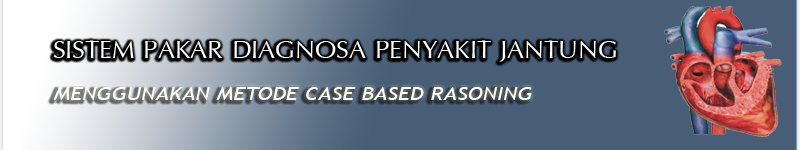
<style>
.page{position:relative;width:800px;height:150px;background:#475e76}
.page>*{position:absolute;margin:0}
.t1{font:39.7px "IrisUPC";color:#ffffff}
.t2{font:18.4px "TrebuchetMS-Italic";color:#ffffff;scale:1.21 1}
</style>
<div class="page">
<p class="t1" style="left:54px;top:40px;width:562px;height:22px">SISTEM PAKAR DIAGNOSA PENYAKIT JANTUNG</p>
<p class="t2" style="left:53px;top:87px;width:479px;height:13px">MENGGUNAKAN METODE CASE BASED RASONING</p>
</div>
